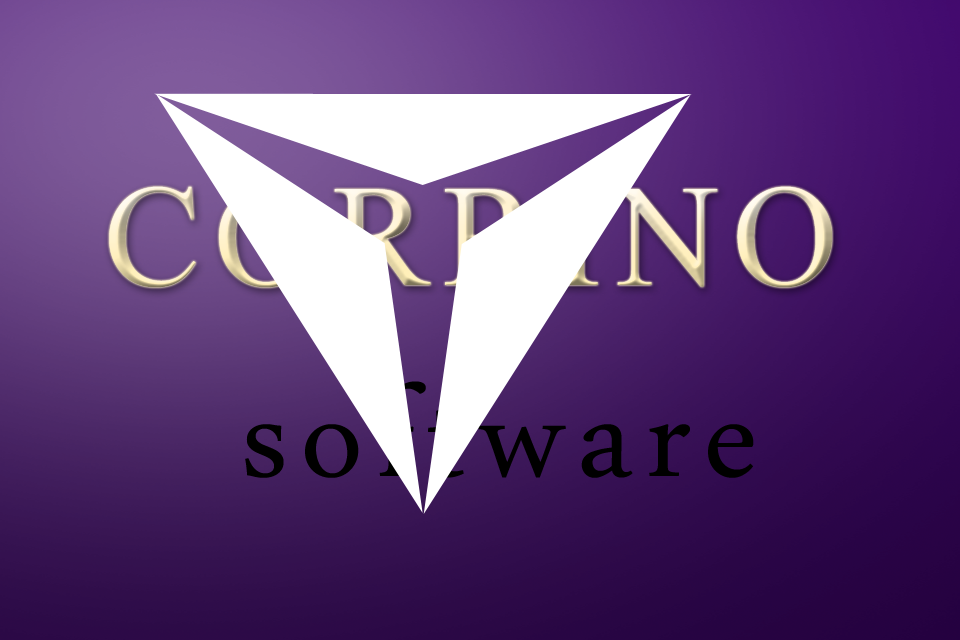
<style>
.page{position:relative;width:960px;height:640px}
.page>*{position:absolute;margin:0}
.t1{font:180px "Aparajita";letter-spacing:0.075em}
.t2{font:180px "ArabicTypesetting";letter-spacing:0.075em;color:#000000}
</style>
<div class="page">
<p class="t1" style="left:109px;top:186px;width:723px;height:102px">CORRINO</p>
<p class="t2" style="left:245px;top:381px;width:509px;height:97px">software</p>
</div>
